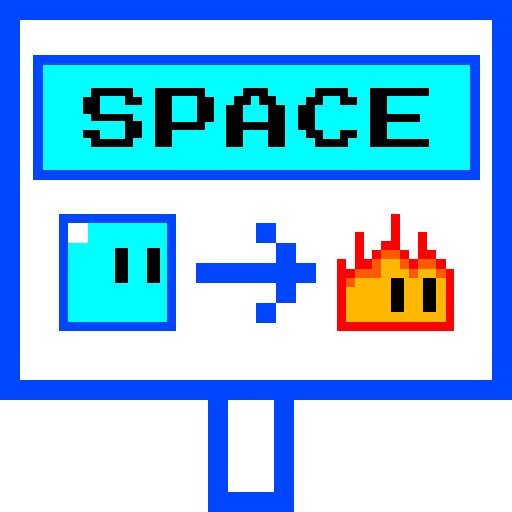
<style>
.page{position:relative;width:512px;height:512px;background:#ffffff}
.page>*{position:absolute;margin:0}
.t1{font:66.7px "PressStart2P-Regular";letter-spacing:0.075em;color:#000000}
</style>
<div class="page">
<p class="t1" style="left:83px;top:88px;width:346px;height:59px">SPACE</p>
</div>
